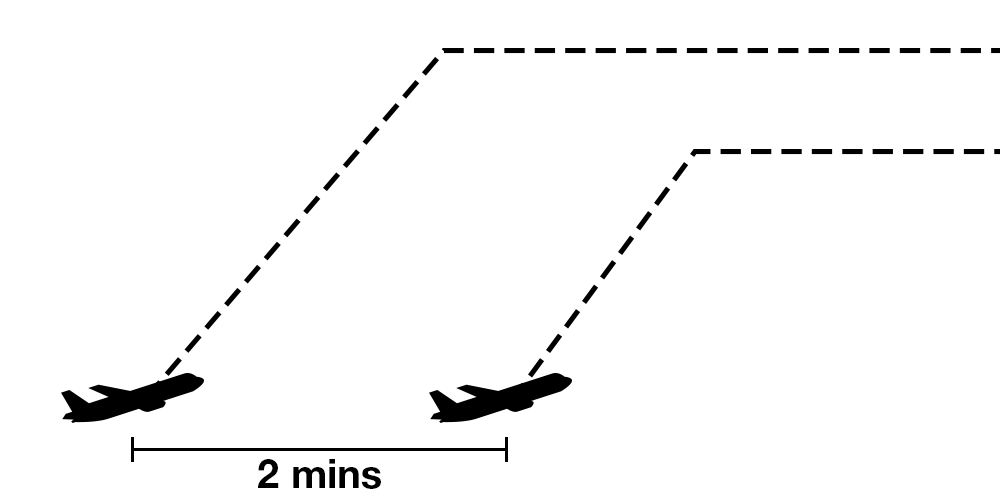
<style>
.page{position:relative;width:1000px;height:500px;background:#ffffff}
.page>*{position:absolute;margin:0}
.t1{font:40px "HelveticaNeueLTStd-Bd";color:#000000}
</style>
<div class="page">
<p class="t1" style="left:258px;top:459px;width:123px;height:30px">2 mins</p>
</div>
